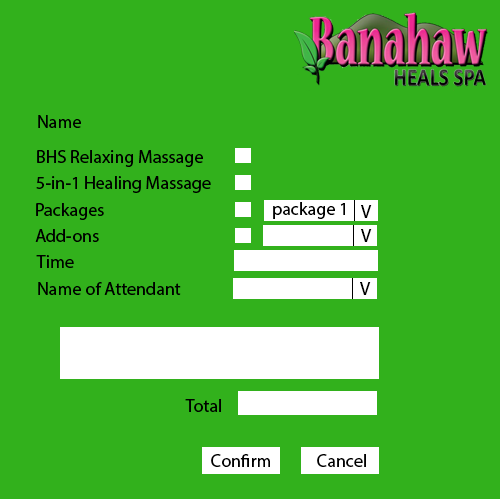
<style>
.page{position:relative;width:500px;height:500px;background:#32b11c}
.page>*{position:absolute;margin:0}
.t1{font:18px "MyriadHebrew-Regular";color:#000000}
</style>
<div class="page">
<p class="t1" style="left:38px;top:115px;width:43px;height:13px">Name</p>
<p class="t1" style="left:37px;top:150px;width:166px;height:17px">BHS Relaxing Massage</p>
<p class="t1" style="left:36px;top:176px;width:175px;height:17px">5-in-1 Healing Massage</p>
<p class="t1" style="left:36px;top:203px;width:68px;height:17px">Packages</p>
<p class="t1" style="left:273px;top:202px;width:72px;height:17px">package 1</p>
<p class="t1" style="left:361px;top:205px;width:11px;height:13px">V</p>
<p class="t1" style="left:35px;top:229px;width:64px;height:13px">Add-ons</p>
<p class="t1" style="left:361px;top:229px;width:11px;height:13px">V</p>
<p class="t1" style="left:36px;top:255px;width:38px;height:13px">Time</p>
<p class="t1" style="left:38px;top:282px;width:143px;height:13px">Name of Attendant</p>
<p class="t1" style="left:360px;top:282px;width:11px;height:13px">V</p>
<p class="t1" style="left:185px;top:399px;width:36px;height:13px">Total</p>
<p class="t1" style="left:211px;top:454px;width:59px;height:13px">Confirm</p>
<p class="t1" style="left:317px;top:454px;width:49px;height:13px">Cancel</p>
</div>
